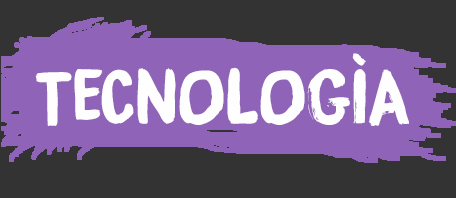
<style>
.page{position:relative;width:456px;height:198px;background:#333333}
.page>*{position:absolute;margin:0}
.t1{font:80px "MidnightSunDEMO-Regular";color:#fffeff}
</style>
<div class="page">
<p class="t1" style="left:35px;top:53px;width:374px;height:73px">TECNOLOGÌA</p>
</div>
